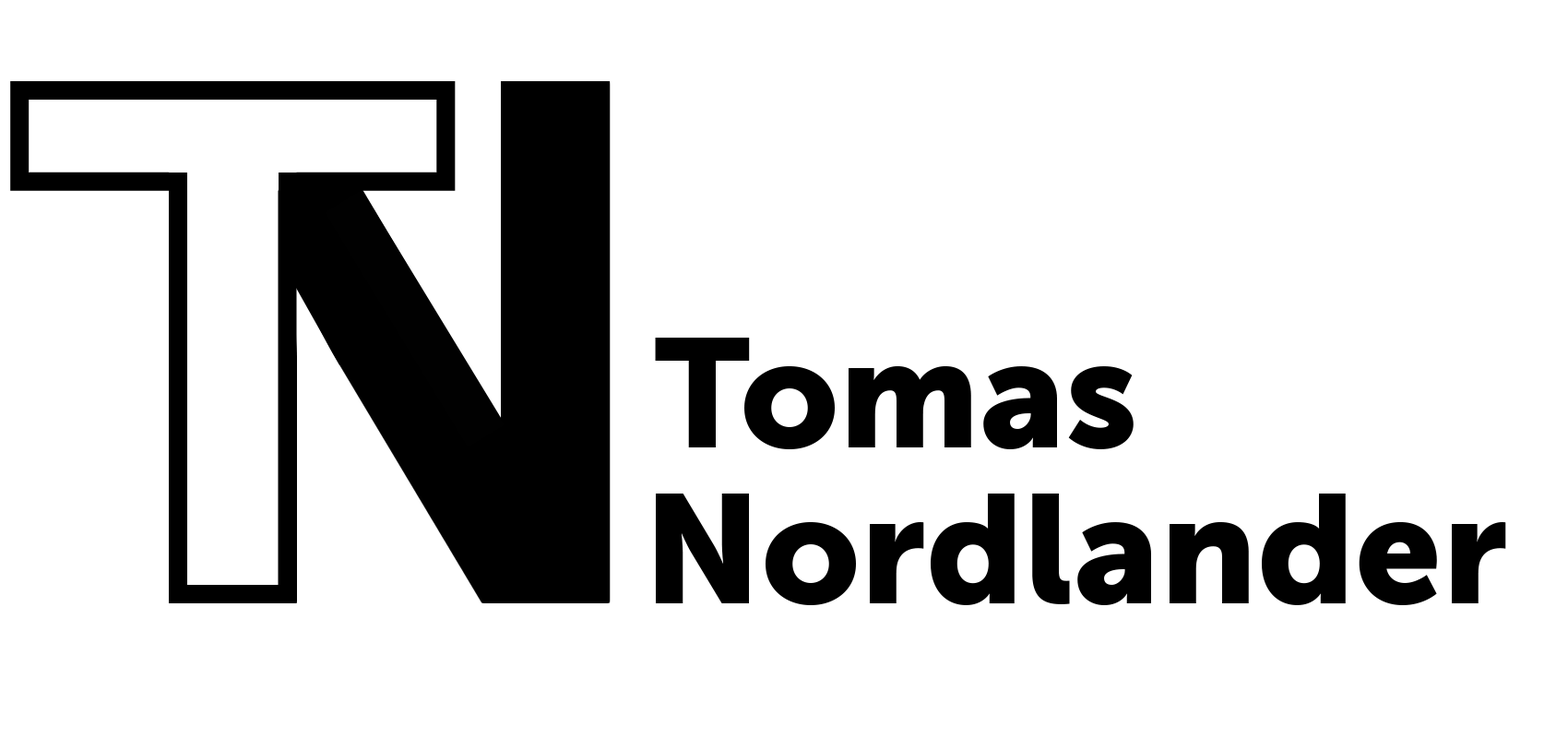
<style>
.page{position:relative;width:1568px;height:738px;background:#ffffff}
.page>*{position:absolute;margin:0}
.t1{font:153.7px "MuseoSans-900";color:#000000}
</style>
<div class="page">
<p class="t1" style="left:655px;top:338px;width:479px;height:111px">Tomas</p>
<p class="t1" style="left:656px;top:493px;width:850px;height:112px">Nordlander</p>
</div>
